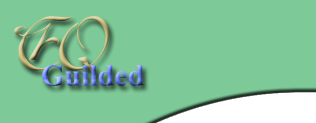
<style>
.page{position:relative;width:316px;height:123px;background:#7dca98}
.page>*{position:absolute;margin:0}
.t1{font:72px "Esperanza"}
.t2{font:30px "TimesNewRomanPS-BoldMT"}
</style>
<div class="page">
<p class="t1" style="left:14px;top:16px;width:95px;height:60px">EQ</p>
<p class="t2" style="left:42px;top:65px;width:102px;height:21px">Guilded</p>
</div>
